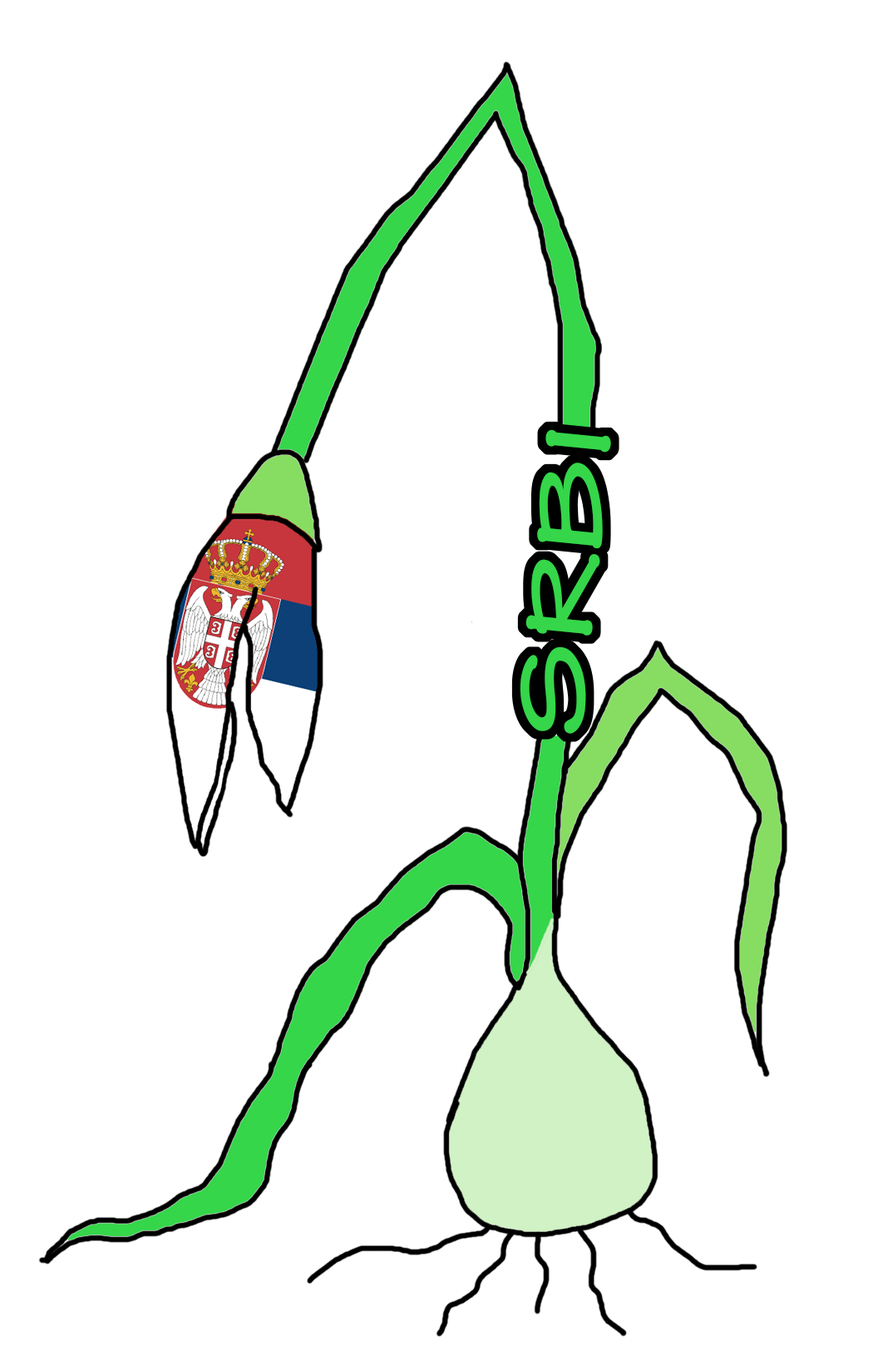
<style>
.page{position:relative;width:873px;height:1366px;background:#ffffff}
.page>*{position:absolute;margin:0}
.t1{font:100.3px "TektonPro-BoldExt";letter-spacing:0.01em;color:#35d64a;scale:1.14 1}
</style>
<div class="page">
<p class="t1" style="left:520px;top:429px;width:91px;height:305px;rotate:-84deg">SRBI</p>
</div>
